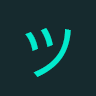
<style>
.page{position:relative;width:96px;height:96px;background:#162a2e}
.page>*{position:absolute;margin:0}
.t1{font:60px "ArialUnicodeMS";color:#02eacd}
.t2{font:60px "NotoSansJavanese-Regular";color:#02eacd}
</style>
<div class="page">
<p class="t1" style="left:25px;top:27px;width:46px;height:49px"><span class="t2"><br></span>ツ</p>
<p class="t1" style="left:25px;top:28px;width:46px;height:49px"><span class="t2"><br></span>ツ</p>
</div>
